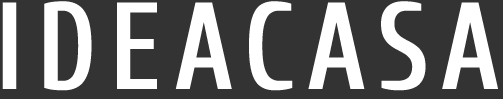
<style>
.page{position:relative;width:503px;height:99px;background:#333333}
.page>*{position:absolute;margin:0}
.t1{font:123.3px "CuprumRoman-Bold";letter-spacing:0.12em;color:#ffffff;scale:0.88 1}
</style>
<div class="page">
<p class="t1" style="left:2px;top:1px;width:496px;height:90px">IDEACASA</p>
</div>
